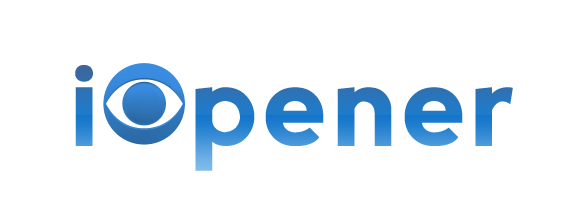
<style>
.page{position:relative;width:586px;height:207px;background:#ffffff}
.page>*{position:absolute;margin:0}
.t1{font:120px "nevis-Bold";letter-spacing:0.02em;color:#297aca}
</style>
<div class="page">
<p class="t1" style="left:75px;top:65px;width:438px;height:106px">i  pener</p>
</div>
